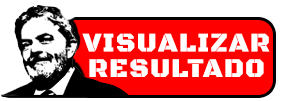
<style>
.page{position:relative;width:282px;height:101px;background:#ffffff}
.page>*{position:absolute;margin:0}
.t1{font:27px/25.6px "BlackOpsOne-Regular";letter-spacing:0.05em;color:#ffffff}
</style>
<div class="page">
<p class="t1" style="left:82px;top:33px;width:188px;height:44px;text-align:center">VISUALIZAR<br>RESULTADO</p>
</div>
